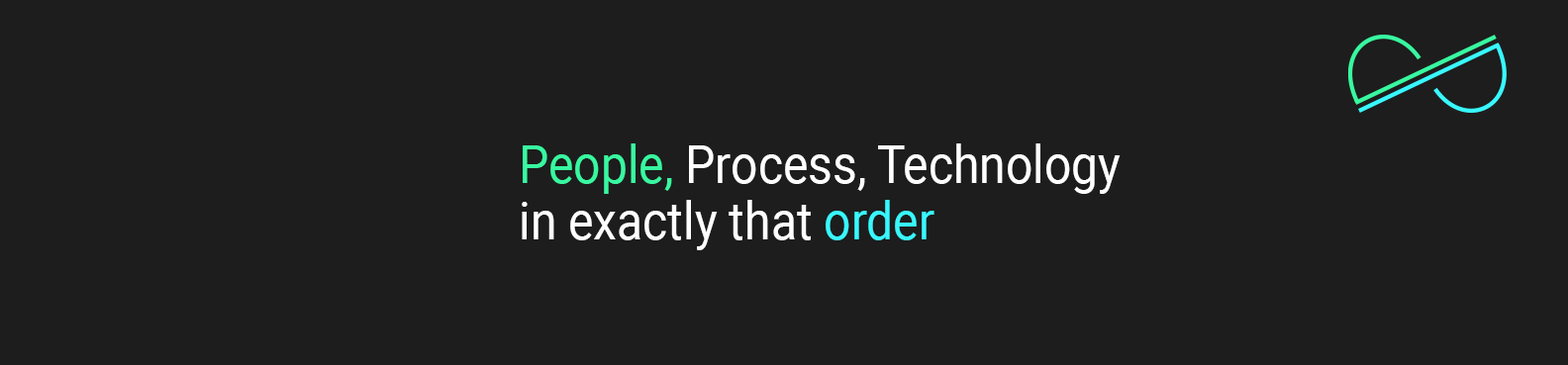
<style>
.page{position:relative;width:1568px;height:365px;background:#1d1d1d}
.page>*{position:absolute;margin:0}
.t1{font:52.3px "Roboto-Regular";color:#ffffff;scale:0.91 1}
.t2{font:52.3px "Roboto-Regular";color:#38f8a0;scale:0.91 1}
.t3{font:52.3px "Roboto-Regular";color:#38f8ff;scale:0.91 1}
</style>
<div class="page">
<p class="t1" style="left:522px;top:144px;width:599px;height:106px"><span class="t2">People,</span> Process, Technology<br>in exactly that <span class="t3">order</span></p>
</div>
